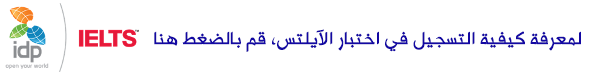
<style>
.page{position:relative;width:600px;height:75px;background:#ffffff}
.page>*{position:absolute;margin:0}
.t1{font:20px "AlHurraTxtlight";color:#1308a3;font-weight:bold}
</style>
<div class="page">
<p class="t1" style="left:154px;top:29px;width:427px;height:23px">لمعرفة كيفية التسجيل في اختبار الآيلتس، قم بالضغط هنا</p>
</div>
